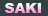
<style>
.page{position:relative;width:48px;height:16px;background:#314242}
.page>*{position:absolute;margin:0}
.t1{font:12.9px "Arial-Black";scale:1.07 1}
</style>
<div class="page">
<p class="t1" style="left:5px;top:3px;width:36px;height:10px">SAKI</p>
</div>
